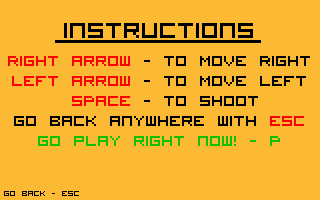
<style>
.page{position:relative;width:320px;height:200px;background:#fcb933}
.page>*{position:absolute;margin:0}
.t1{font:30px "VisitorTT1BRK";color:#000000}
.t2{font:20px "VisitorTT1BRK";color:#000000}
.t3{font:20px "VisitorTT1BRK";color:#ff0000}
.t4{font:20px "VisitorTT1BRK";color:#12c000}
.t5{font:10px "VisitorTT1BRK";color:#000000}
</style>
<div class="page">
<p class="t1" style="left:64px;top:23px;width:189px;height:15px">instructions</p>
<p class="t2" style="left:8px;top:56px;width:302px;height:10px"><span class="t3">Right Arrow </span>- To Move Right</p>
<p class="t2" style="left:12px;top:76px;width:294px;height:10px"><span class="t3">Left Arrow </span>- To Move left</p>
<p class="t2" style="left:72px;top:96px;width:186px;height:10px"><span class="t3">SPACE </span>- To Shoot</p>
<p class="t2" style="left:14px;top:116px;width:290px;height:10px">Go back anywhere with <span class="t3">esc</span></p>
<p class="t4" style="left:38px;top:136px;width:242px;height:10px">Go play right now! - P</p>
<p class="t5" style="left:4px;top:191px;width:75px;height:5px">go back - ESC</p>
</div>
